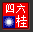
<style>
.page{position:relative;width:33px;height:32px;background:#f20000}
.page>*{position:absolute;margin:0}
.t1{font:10.4px "SimSun";color:#ffffff}
.t2{font:11.7px "SimSun";color:#ffffff}
</style>
<div class="page">
<p class="t1" style="left:6px;top:4px;width:19px;height:9px">四六</p>
<p class="t2" style="left:16px;top:15px;width:11px;height:12px">桂</p>
</div>
